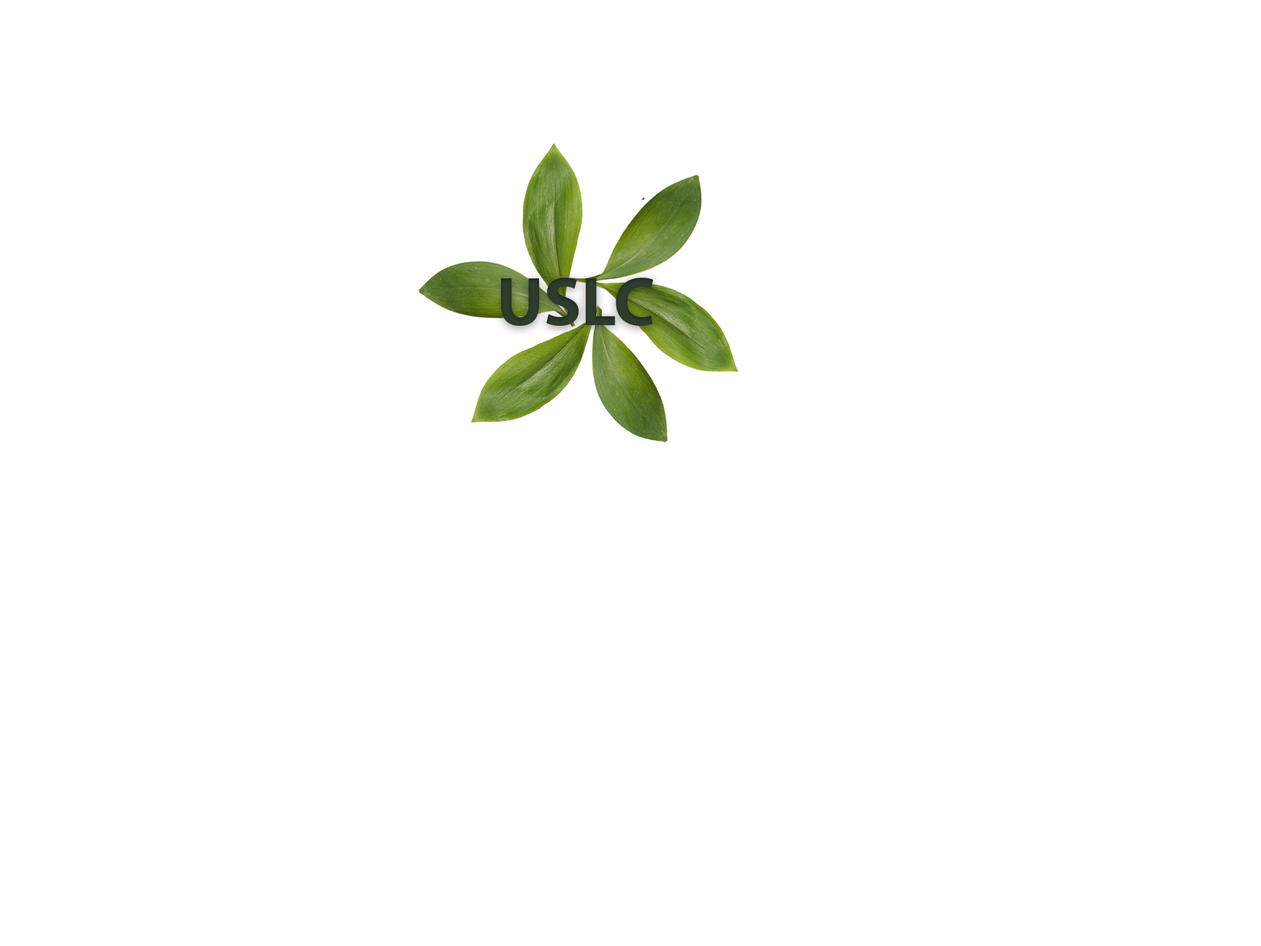
<style>
.page{position:relative;width:1261px;height:946px;background:#ffffff}
.page>*{position:absolute;margin:0}
.t1{font:69.5px "MyriadPro-Bold";color:#2e3d2e}
</style>
<div class="page">
<p class="t1" style="left:501px;top:278px;width:152px;height:48px">USLC</p>
</div>
